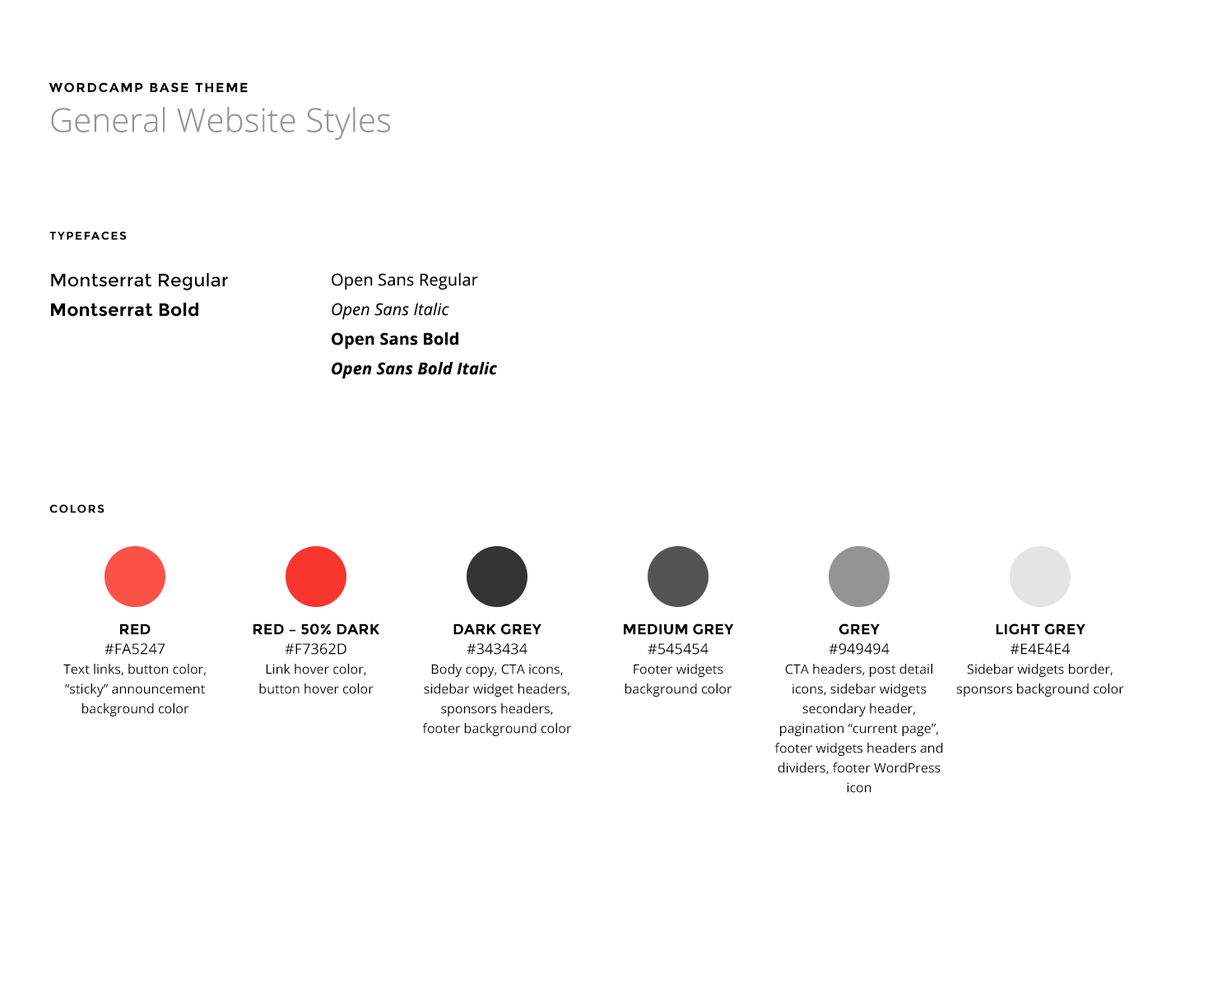
<style>
.page{position:relative;width:1208px;height:987px;background:#ffffff}
.page>*{position:absolute;margin:0}
.t1{font:13.2px "Montserrat-Bold";letter-spacing:0.1em;color:#000000;text-transform:uppercase}
.t2{font:32.9px "OpenSans-Light";letter-spacing:0.006em;color:#939598}
.t3{font:11.5px "Montserrat-Bold";letter-spacing:0.1em;color:#000000;text-transform:uppercase}
.t4{font:18.1px/29.6px "Montserrat-Regular";letter-spacing:0.006em;color:#000000}
.t5{font:18.1px/29.6px "Montserrat-Bold";letter-spacing:0.006em;color:#000000}
.t6{font:16.5px/29.6px "OpenSans-BoldItalic";letter-spacing:0.006em;color:#000000}
.t7{font:16.5px/29.6px "OpenSans";letter-spacing:0.006em;color:#000000}
.t8{font:16.5px/29.6px "OpenSans-Italic";letter-spacing:0.006em;color:#000000}
.t9{font:16.5px/29.6px "OpenSans-Bold";letter-spacing:0.006em;color:#000000}
.t10{font:13.2px/19.7px "OpenSans";color:#000000}
.t11{font:14.8px/19.7px "Montserrat-Bold";letter-spacing:0.006em;color:#000000;text-transform:uppercase}
.t12{font:14.8px/19.7px "OpenSans";letter-spacing:0.006em;color:#000000}
</style>
<div class="page">
<p class="t1" style="left:49px;top:82px;width:199px;height:11px">WordCamp Base Theme</p>
<p class="t2" style="left:51px;top:107px;width:340px;height:34px">General Website Styles</p>
<p class="t3" style="left:49px;top:231px;width:78px;height:9px">Typefaces</p>
<p class="t4" style="left:51px;top:273px;width:177px;height:44px">Montserrat Regular<br><span class="t5">Montserrat Bold</span></p>
<p class="t6" style="left:332px;top:273px;width:166px;height:106px"><span class="t7">Open Sans Regular<br></span><span class="t8">Open Sans Italic<br></span><span class="t9">Open Sans Bold<br></span>Open Sans Bold Italic</p>
<p class="t3" style="left:49px;top:504px;width:55px;height:9px">Colors</p>
<p class="t10" style="left:63px;top:624px;width:143px;height:93px;text-align:center"><span class="t11">Red<br></span><span class="t12">#FA5247<br></span>Text links, button color, “sticky” announcement background color</p>
<p class="t10" style="left:253px;top:624px;width:127px;height:70px;text-align:center"><span class="t11">Red – 50% Dark<br></span><span class="t12">#F7362D<br></span>Link hover color,<br>button hover color</p>
<p class="t10" style="left:422px;top:624px;width:150px;height:112px;text-align:center"><span class="t11">Dark Grey<br></span><span class="t12">#343434<br></span>Body copy, CTA icons, sidebar widget headers, sponsors headers, <br>footer background color</p>
<p class="t10" style="left:624px;top:624px;width:110px;height:73px;text-align:center"><span class="t11">Medium Grey<br></span><span class="t12">#545454<br></span>Footer widgets<br>background color</p>
<p class="t10" style="left:774px;top:624px;width:169px;height:169px;text-align:center"><span class="t11">Grey<br></span><span class="t12">#949494<br></span>CTA headers, post detail icons, sidebar widgets secondary header, pagination “current page”, footer widgets headers and dividers, footer WordPress icon</p>
<p class="t10" style="left:957px;top:624px;width:167px;height:73px;text-align:center"><span class="t11">LIght Grey<br></span><span class="t12">#E4E4E4<br></span>Sidebar widgets border, sponsors background color</p>
</div>
